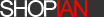
<style>
.page{position:relative;width:104px;height:17px;background:#333333}
.page>*{position:absolute;margin:0}
.t1{font:23px "ArialMT";letter-spacing:-0.1em;color:#ffffff}
.t2{font:23px "ArialMT";letter-spacing:-0.1em;color:#ff0000}
</style>
<div class="page">
<p class="t1" style="left:0px;top:0px;width:88px;height:17px">SHOP<span class="t2">IAN</span></p>
</div>
